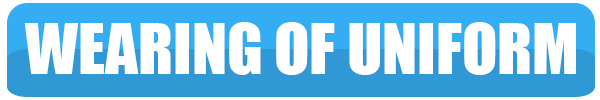
<style>
.page{position:relative;width:600px;height:100px;background:#ffffff}
.page>*{position:absolute;margin:0}
.t1{font:64.9px "Impact";color:#ffffff}
</style>
<div class="page">
<p class="t1" style="left:24px;top:22px;width:552px;height:53px">WEARING OF UNIFORM</p>
</div>
